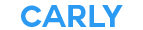
<style>
.page{position:relative;width:143px;height:30px;background:#ffffff}
.page>*{position:absolute;margin:0}
.t1{font:30px "Couture-Bold";color:#2a9af3}
</style>
<div class="page">
<p class="t1" style="left:21px;top:5px;width:102px;height:22px">CARLY</p>
</div>
